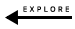
<style>
.page{position:relative;width:75px;height:29px;background:#ffffff}
.page>*{position:absolute;margin:0}
.t1{font:7.6px "SukhumvitSet-Medium";letter-spacing:0.34em;color:#000000}
</style>
<div class="page">
<p class="t1" style="left:23px;top:6px;width:46px;height:6px">EXPLORE</p>
</div>
